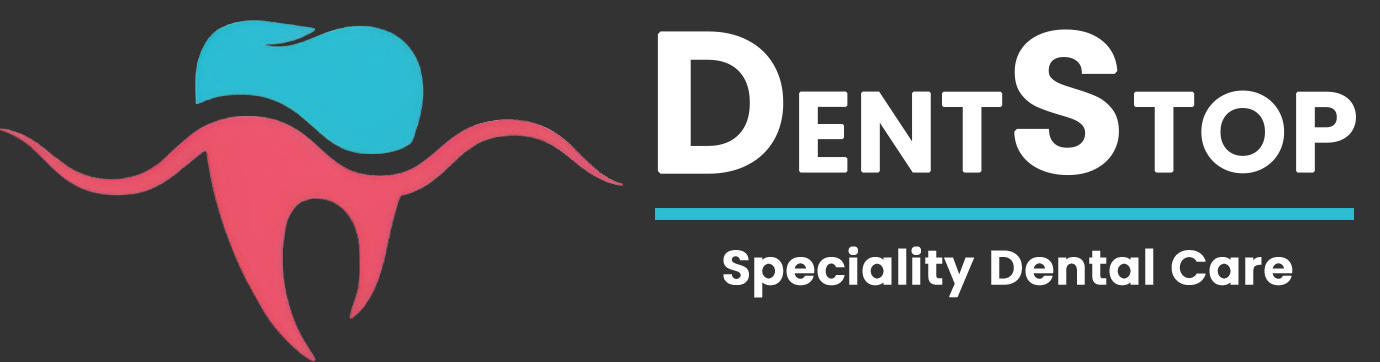
<style>
.page{position:relative;width:1380px;height:362px;background:#333333}
.page>*{position:absolute;margin:0}
.t1{font:111.4px "Poppins-SemiBold";color:#ffffff;font-weight:bold}
.t2{font:196.1px "Poppins-SemiBold";color:#ffffff;font-weight:bold}
.t3{font:47.9px "Poppins-SemiBold";color:#ffffff;font-weight:bold}
</style>
<div class="page">
<p class="t1" style="left:657px;top:29px;width:699px;height:147px"><span class="t2">D</span>ENT<span class="t2">S</span>TOP</p>
<p class="t3" style="left:723px;top:246px;width:570px;height:52px">Speciality Dental Care</p>
</div>
